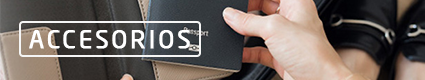
<style>
.page{position:relative;width:425px;height:80px}
.page>*{position:absolute;margin:0}
.t1{font:24px "NeoSansPro-Regular";letter-spacing:0.1em;color:#ffffff;font-weight:bold}
</style>
<div class="page">
<p class="t1" style="left:29px;top:30px;width:161px;height:19px">ACCESORIOS</p>
</div>
